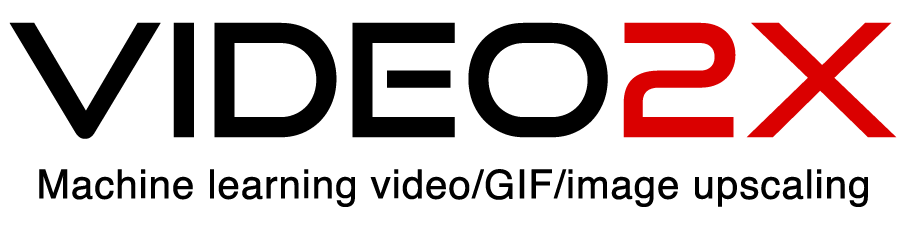
<style>
.page{position:relative;width:908px;height:228px;background:#ffffff}
.page>*{position:absolute;margin:0}
.t1{font:157px "GoodTimesRg-Regular";color:#000000}
.t2{font:157px "GoodTimesRg-Regular";color:#da0000}
.t3{font:40px "Helvetica";color:#000000;font-weight:bold}
</style>
<div class="page">
<p class="t1" style="left:9px;top:22px;width:888px;height:117px">Video<span class="t2">2X</span></p>
<p class="t3" style="left:39px;top:169px;width:829px;height:38px">Machine learning video/GIF/image upscaling</p>
</div>
